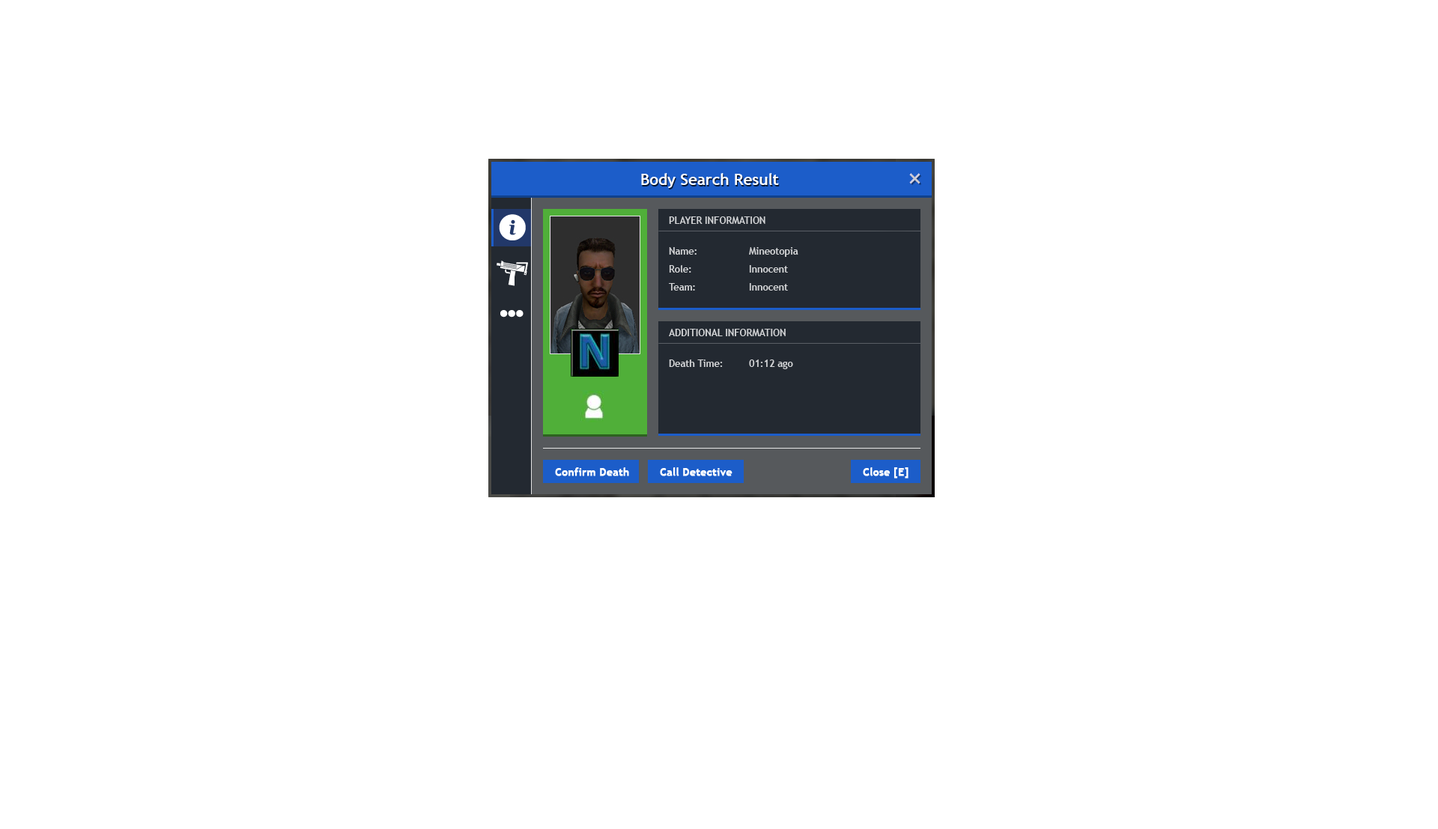
<style>
.page{position:relative;width:1438px;height:829px;background:#ffffff}
.page>*{position:absolute;margin:0}
.t1{font:15.5px "TrebuchetMS-Bold";color:#ffffff}
.t2{font:9.5px "TrebuchetMS-Bold";color:#d3d4d6}
.t3{font:9.5px/18px "TrebuchetMS-Bold";color:#d3d4d6}
.t4{font:10.5px "TrebuchetMS-Bold";color:#ffffff;font-weight:bold}
</style>
<div class="page">
<p class="t1" style="left:641px;top:173px;width:138px;height:15px">Body Search Result</p>
<p class="t2" style="left:669px;top:216px;width:96px;height:8px">PLAYER INFORMATION</p>
<p class="t3" style="left:669px;top:247px;width:28px;height:44px">Name:<br>Role:<br>Team:</p>
<p class="t3" style="left:749px;top:247px;width:49px;height:44px">Mineotopia<br>Innocent<br>Innocent</p>
<p class="t2" style="left:669px;top:329px;width:117px;height:7px">ADDITIONAL INFORMATION</p>
<p class="t2" style="left:669px;top:360px;width:54px;height:7px">Death Time:</p>
<p class="t2" style="left:749px;top:360px;width:44px;height:9px">01:12 ago</p>
<p class="t4" style="left:555px;top:467px;width:74px;height:9px">Confirm Death</p>
<p class="t4" style="left:660px;top:467px;width:73px;height:9px">Call Detective</p>
<p class="t4" style="left:863px;top:467px;width:46px;height:12px">Close [E]</p>
</div>
